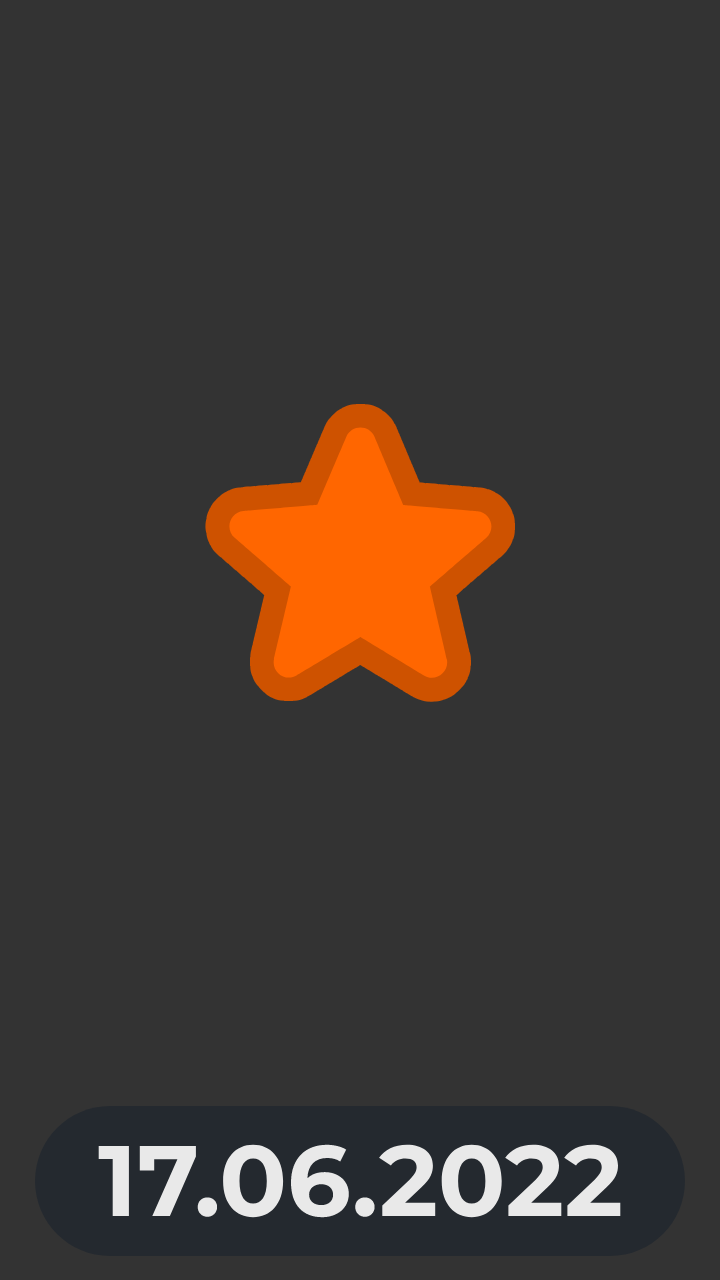
<style>
.page{position:relative;width:720px;height:1280px;background:#333333}
.page>*{position:absolute;margin:0}
.t1{font:100px "Montserrat-Bold";color:#e9e9e9}
</style>
<div class="page">
<p class="t1" style="left:98px;top:1144px;width:523px;height:74px">17.06.2022</p>
</div>
